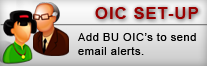
<style>
.page{position:relative;width:207px;height:66px}
.page>*{position:absolute;margin:0}
.t1{font:17.3px "Arial-BoldMT";letter-spacing:0.04em;color:#990000}
.t2{font:11.3px/13.6px "ArialMT";letter-spacing:0.04em;color:#000000}
</style>
<div class="page">
<p class="t1" style="left:95px;top:7px;width:103px;height:12px">OIC SET-UP</p>
<p class="t2" style="left:78px;top:33px;width:118px;height:22px">Add BU OIC’s to send<br>email alerts.</p>
</div>
